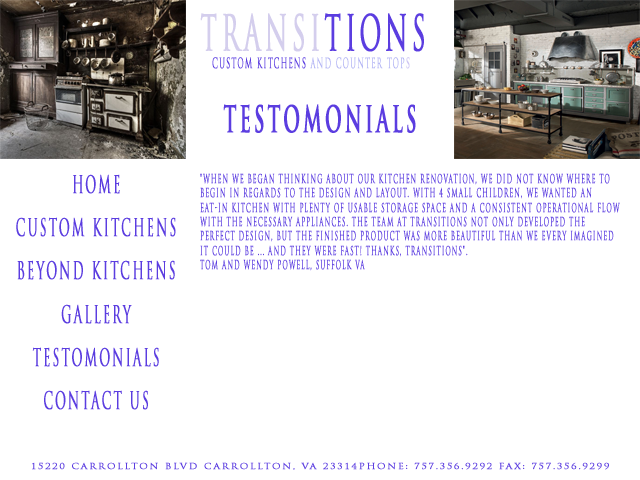
<style>
.page{position:relative;width:640px;height:480px;background:#ffffff}
.page>*{position:absolute;margin:0}
.t1{font:48px "TrajanPro-Regular";letter-spacing:0.15em;color:#d4ceed;text-transform:uppercase;font-weight:bold;scale:0.5 1}
.t2{font:48px "TrajanPro-Regular";letter-spacing:0.15em;color:#5b3de0;text-transform:uppercase;font-weight:bold;scale:0.5 1}
.t3{font:14px "TrajanPro-Regular";letter-spacing:0.15em;color:#5b3de0;text-transform:uppercase;font-weight:bold;scale:0.5 1}
.t4{font:14px "TrajanPro-Regular";letter-spacing:0.15em;color:#b2b4f4;text-transform:uppercase;font-weight:bold;scale:0.5 1}
.t5{font:14px "TrajanPro-Regular";letter-spacing:0.15em;color:#ccc3f2;text-transform:uppercase;font-weight:bold;scale:0.5 1}
.t6{font:36px "TrajanPro-Bold";letter-spacing:0.15em;color:#5b3de0;text-transform:uppercase;font-weight:bold;scale:0.5 1}
.t7{font:24px "TrajanPro-Regular";letter-spacing:0.15em;color:#5b3de0;text-transform:uppercase;font-weight:bold;scale:0.5 1}
.t8{font:12px "TrajanPro-Regular";letter-spacing:0.15em;color:#5b3de0;text-transform:uppercase;font-weight:bold;scale:0.5 1}
.t9{font:8px "TrajanPro-Regular";letter-spacing:0.15em;color:#5b3de0;text-transform:uppercase;font-weight:bold;scale:1.19 1}
</style>
<div class="page">
<p class="t1" style="left:200px;top:13px;width:224px;height:39px">Transi<span class="t2">tions</span></p>
<p class="t3" style="left:212px;top:57px;width:198px;height:12px">Custom Kitchens <span class="t4">and Counter Top</span><span class="t5">s</span></p>
<p class="t6" style="left:223px;top:104px;width:193px;height:29px">testomonials</p>
<p class="t7" style="left:16px;top:174px;width:160px;height:236px;text-align:center">HOme<br><br>Custom Kitchens<br><br>Beyond Kitchens<br><br>Gallery<br><br>Testomonials<br><br>Contact Us</p>
<p class="t8" style="left:200px;top:173px;width:420px;height:98px">"When we began thinking about our kitchen renovation, we did not know where to begin in regards to the design and layout. With 4 small children, we wanted an eat-in kitchen with plenty of usable storage space and a consistent operational flow with the necessary appliances. The team at Transitions not only developed the perfect design, but the finished product was more beautiful than we every imagined it could be ... and they were fast! Thanks, Transitions".<br>Tom and Wendy Powell, Suffolk VA</p>
<p class="t9" style="left:32px;top:462px;width:577px;height:8px">15220 Carrollton Blvd Carrollton, VA 23314Phone: 757.356.9292 Fax: 757.356.9299</p>
</div>
